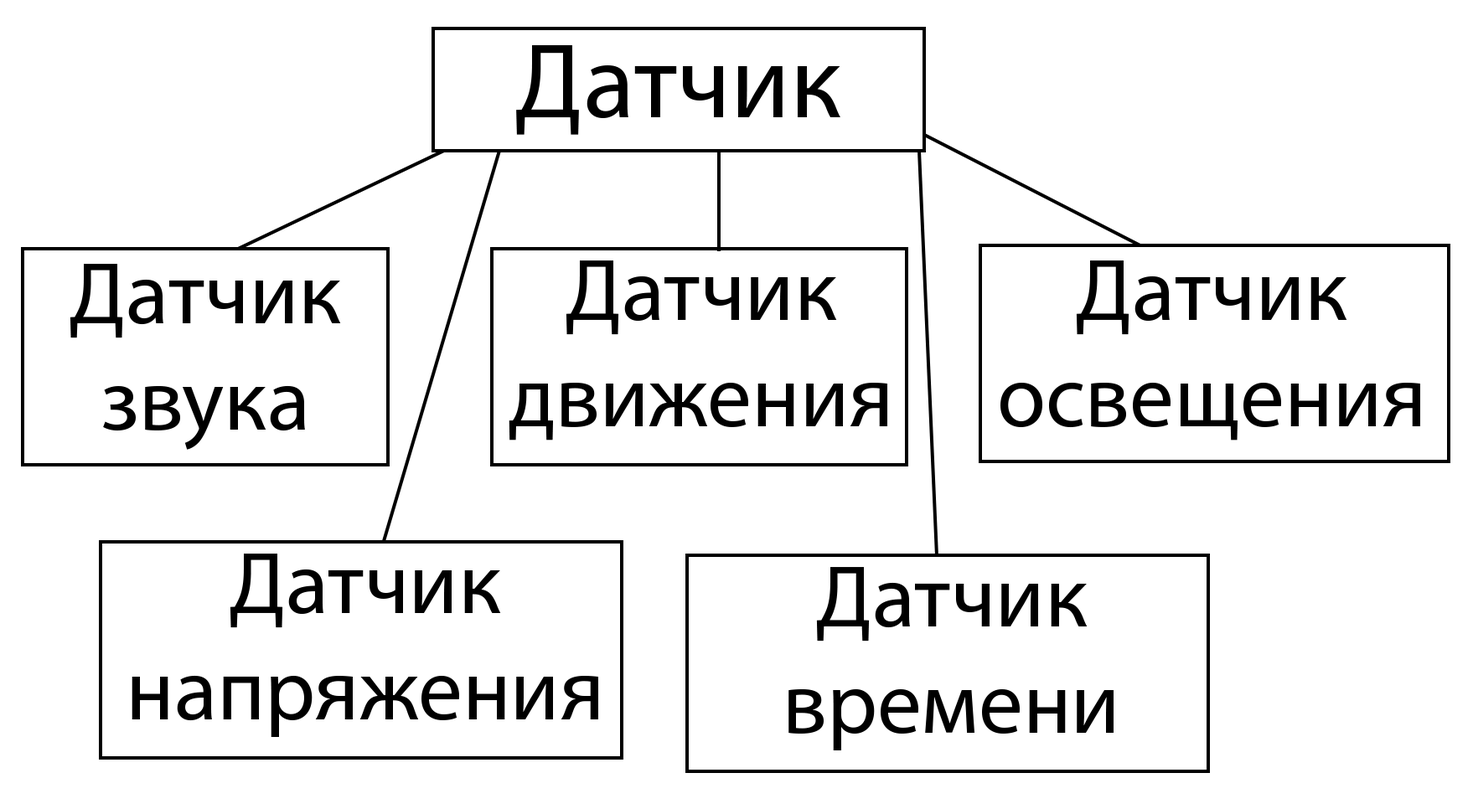
<style>
.page{position:relative;width:1473px;height:809px;background:#ffffff}
.page>*{position:absolute;margin:0}
.t1{font:106.4px "MyriadPro-Regular";color:#000000}
.t2{font:88.7px "MyriadPro-Regular";color:#000000}
</style>
<div class="page">
<p class="t1" style="left:516px;top:44px;width:324px;height:91px">Датчик</p>
<p class="t2" style="left:70px;top:264px;width:271px;height:186px;text-align:center">Датчик<br>звука</p>
<p class="t2" style="left:509px;top:261px;width:378px;height:180px;text-align:center">Датчик<br>движения</p>
<p class="t2" style="left:1001px;top:261px;width:419px;height:180px;text-align:center">Датчик<br>освещения</p>
<p class="t2" style="left:132px;top:554px;width:466px;height:183px;text-align:center">Датчик<br>напряжения</p>
<p class="t2" style="left:789px;top:567px;width:325px;height:184px;text-align:center">Датчик<br>времени</p>
</div>
